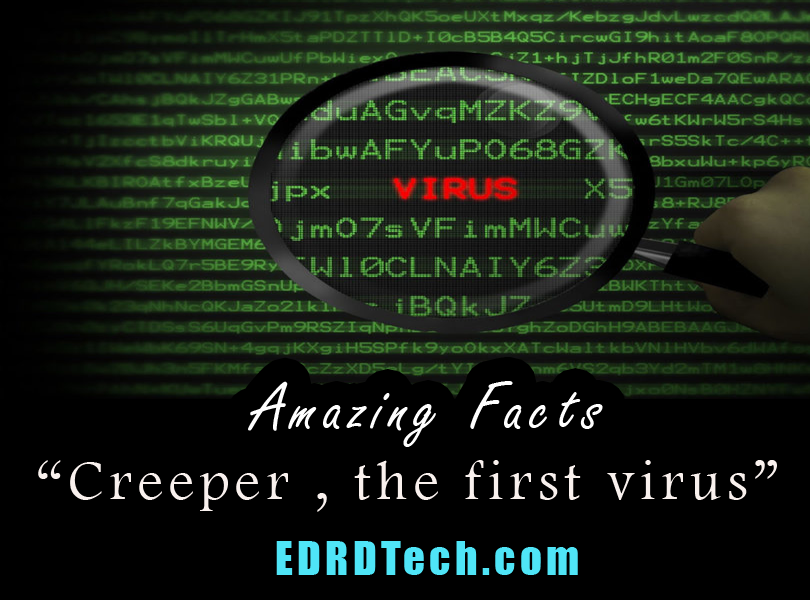
<style>
.page{position:relative;width:810px;height:600px;background:#000000}
.page>*{position:absolute;margin:0}
.t1{font:72px "FreestyleScript-Regular";letter-spacing:0.1em;color:#ffffff}
.t2{font:57px "FootlightMTLight";letter-spacing:0.1em;color:#f9f1ee}
.t3{font:43px "Impact";letter-spacing:0.1em;color:#4fe5f7}
</style>
<div class="page">
<p class="t1" style="left:248px;top:381px;width:355px;height:66px">Amazing Facts</p>
<p class="t2" style="left:38px;top:460px;width:739px;height:52px">“Creeper , the first virus”</p>
<p class="t3" style="left:276px;top:541px;width:302px;height:34px">EDRDTech.com</p>
</div>
